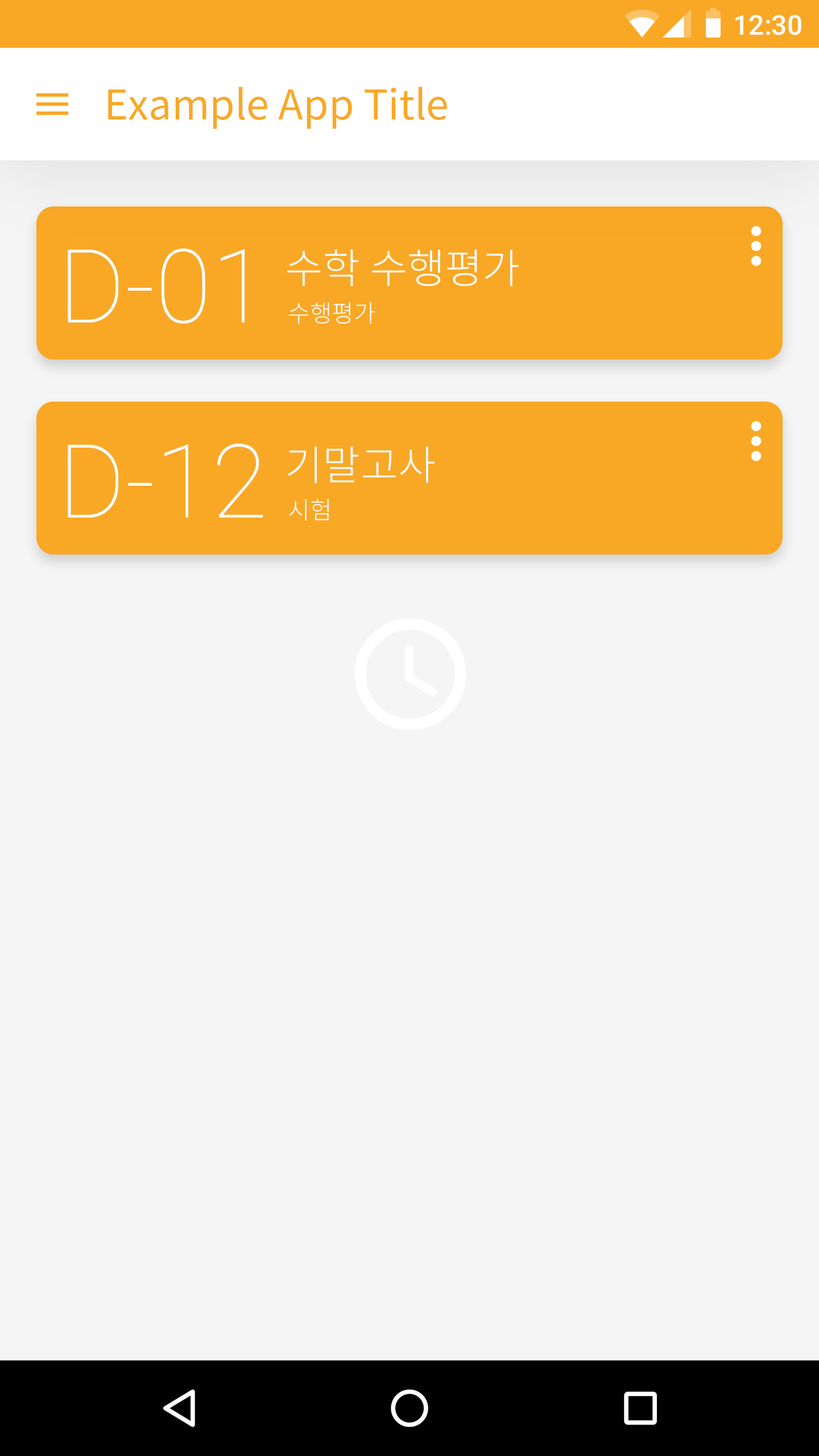
<style>
.page{position:relative;width:819px;height:1456px;background:#f5f5f5}
.page>*{position:absolute;margin:0}
.t1{font:27.3px "Roboto-Medium";color:#ffffff}
.t2{font:40.9px "NotoSansCJKkr-Regular";color:#f9a825}
.t3{font:102.4px "Roboto-Thin";color:#fffefe}
.t4{font:40.9px "NotoSansCJKkr-Light";color:#fffefe}
.t5{font:23.9px "NotoSansCJKkr-Light";color:#fffefe}
</style>
<div class="page">
<p class="t1" style="left:735px;top:15px;width:66px;height:20px">12:30</p>
<p class="t2" style="left:108px;top:86px;width:339px;height:43px">Example App Title</p>
<p class="t3" style="left:68px;top:249px;width:177px;height:75px">D-01</p>
<p class="t4" style="left:287px;top:249px;width:232px;height:37px">수학 수행평가</p>
<p class="t5" style="left:289px;top:302px;width:86px;height:22px">수행평가</p>
<p class="t3" style="left:68px;top:444px;width:195px;height:74px">D-12</p>
<p class="t4" style="left:288px;top:446px;width:147px;height:37px">기말고사</p>
<p class="t5" style="left:289px;top:499px;width:40px;height:21px">시험</p>
</div>
